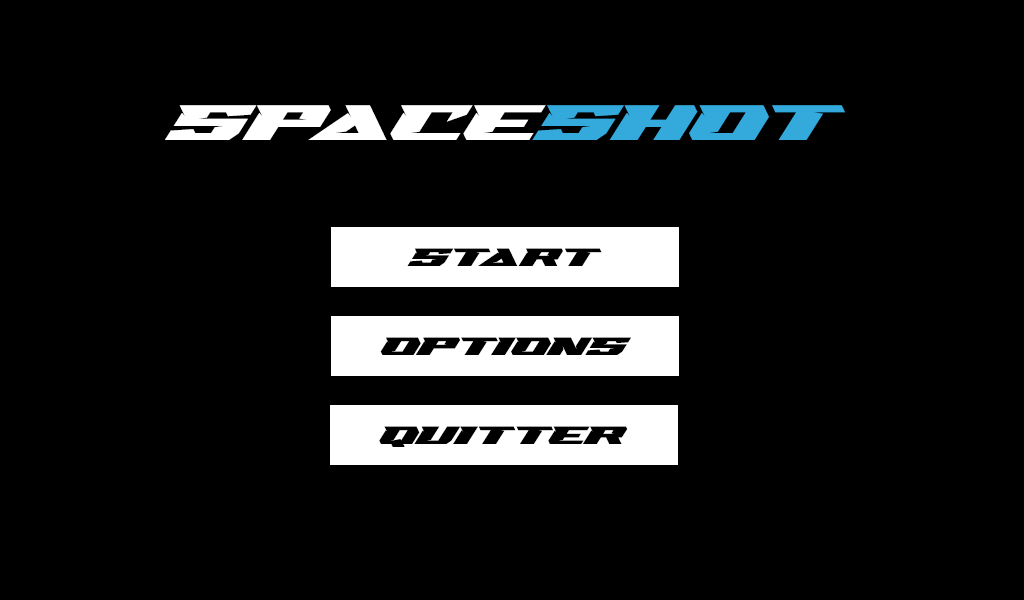
<style>
.page{position:relative;width:1024px;height:600px;background:#000000}
.page>*{position:absolute;margin:0}
.t1{font:48px "SwipeRaceDemoRegular";color:#ffffff}
.t2{font:48px "SwipeRaceDemoRegular";color:#34aadc}
.t3{font:24px "SwipeRaceDemoRegular";color:#000000}
</style>
<div class="page">
<p class="t1" style="left:165px;top:105px;width:680px;height:35px">SPACE<span class="t2">SHOT</span></p>
<p class="t3" style="left:407px;top:248px;width:195px;height:18px">sTART</p>
<p class="t3" style="left:380px;top:337px;width:251px;height:18px">Options</p>
<p class="t3" style="left:379px;top:426px;width:249px;height:21px">QUITTER</p>
</div>
